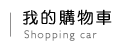
<style>
.page{position:relative;width:120px;height:50px;background:#ffffff}
.page>*{position:absolute;margin:0}
.t1{font:16px "DFYuan-Lt-HK-BF";letter-spacing:0.12em;color:#000000;font-weight:bold}
.t2{font:11px "Humanist521BT-Light";letter-spacing:0.12em;color:#707070;font-weight:bold}
</style>
<div class="page">
<p class="t1" style="left:23px;top:9px;width:89px;height:16px">我的購物車</p>
<p class="t2" style="left:24px;top:30px;width:73px;height:11px">Shopping car</p>
</div>
